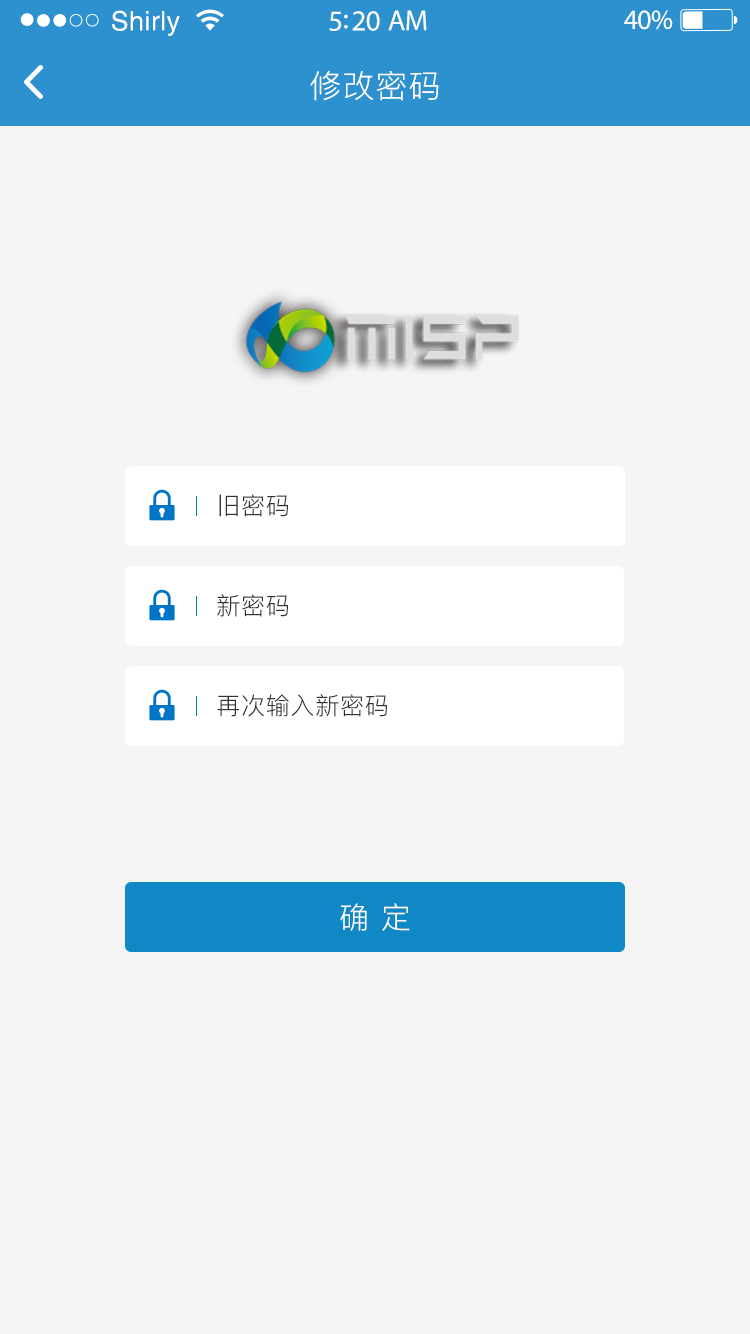
<style>
.page{position:relative;width:750px;height:1334px;background:#f5f5f5}
.page>*{position:absolute;margin:0}
.t1{font:26.8px "Helvetica";letter-spacing:0.02em;color:#ffffff}
.t2{font:29.1px "MyriadPro-Regular";letter-spacing:-0.02em;color:#ffffff}
.t3{font:27.9px "MyriadPro-Regular";letter-spacing:-0.02em;color:#ffffff}
.t4{font:32px "PingFang-SC-Regular";letter-spacing:0.03em;color:#ffffff}
.t5{font:24px "PingFang-SC-Regular";letter-spacing:0.03em;color:#323232}
.t6{font:30px "PingFang-SC-Regular";letter-spacing:0.03em;color:#ffffff}
</style>
<div class="page">
<p class="t1" style="left:112px;top:10px;width:68px;height:26px">Shirly</p>
<p class="t2" style="left:329px;top:10px;width:98px;height:21px">5:20 AM</p>
<p class="t3" style="left:624px;top:10px;width:49px;height:20px">40%</p>
<p class="t4" style="left:310px;top:70px;width:129px;height:31px">修改密码</p>
<p class="t5" style="left:219px;top:494px;width:69px;height:23px">旧密码</p>
<p class="t5" style="left:217px;top:594px;width:71px;height:23px">新密码</p>
<p class="t5" style="left:217px;top:694px;width:170px;height:23px">再次输入新密码</p>
<p class="t6" style="left:340px;top:903px;width:70px;height:28px">确 定</p>
</div>
